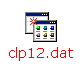
<style>
.page{position:relative;width:80px;height:80px;background:#ffffff}
.page>*{position:absolute;margin:0}
.t1{font:14px "MSReferenceSansSerif";color:#ff0000}
</style>
<div class="page">
<p class="t1" style="left:9px;top:47px;width:64px;height:14px">clp12.dat</p>
</div>
